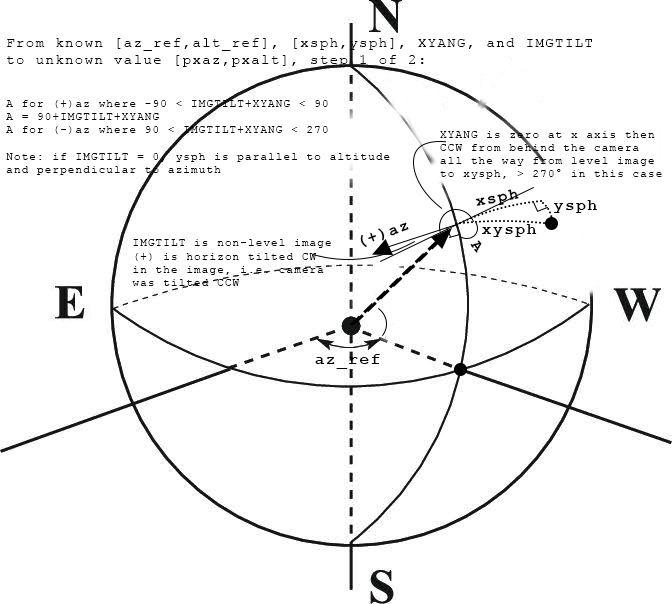
<style>
.page{position:relative;width:672px;height:604px;background:#ffffff}
.page>*{position:absolute;margin:0}
.t1{font:11px "CourierNewPSMT";letter-spacing:0.1em;color:#000000}
.t2{font:14px "CourierNewPSMT";letter-spacing:0.1em;color:#000000}
.t3{font:16px "CourierNewPS-BoldMT";letter-spacing:0.1em;color:#000000}
</style>
<div class="page">
<p class="t1" style="left:6px;top:38px;width:586px;height:137px"><span class="t2">From known [az_ref,alt_ref], [xsph,ysph], XYANG, and IMGTILT<br>to unknown value [pxaz,pxalt], step 1 of 2:<br><br></span><br>A for (+)az where -90 &lt; IMGTILT+XYANG &lt; 90<br>A = 90+IMGTILT+XYANG<br>A for (-)az where 90 &lt; IMGTILT+XYANG &lt; 270<br><br>Note: if IMGTILT = 0, ysph is parallel to altitude<br>and perpendicular to azimuth</p>
<p class="t1" style="left:440px;top:131px;width:222px;height:48px">XYANG is zero at x axis then<br>CCW from behind the camera<br>all the way from level image<br>to xysph, &gt; 270° in this case</p>
<p class="t3" style="left:475px;top:189px;width:44px;height:17px;rotate:-10deg">xsph</p>
<p class="t3" style="left:554px;top:200px;width:43px;height:13px">ysph</p>
<p class="t3" style="left:360px;top:222px;width:49px;height:25px;rotate:-20deg">(+)az</p>
<p class="t3" style="left:482px;top:224px;width:55px;height:13px">xysph</p>
<p class="t1" style="left:132px;top:239px;width:199px;height:47px">IMGTILT is non-level image<br>(+) is horizon tilted CW<br>in the image, i.e. camera<br>was tilted CCW</p>
<p class="t3" style="left:470px;top:240px;width:12px;height:13px;rotate:52deg">A</p>
<p class="t3" style="left:315px;top:354px;width:65px;height:15px">az_ref</p>
</div>
